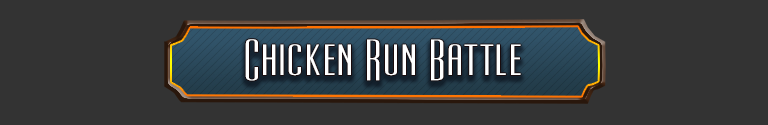
<style>
.page{position:relative;width:768px;height:125px;background:#333333}
.page>*{position:absolute;margin:0}
.t1{font:48px "UltraCondensedSansSerif";letter-spacing:-0.005em;color:#ffffff}
</style>
<div class="page">
<p class="t1" style="left:245px;top:39px;width:276px;height:42px">Chicken Run Battle</p>
</div>
